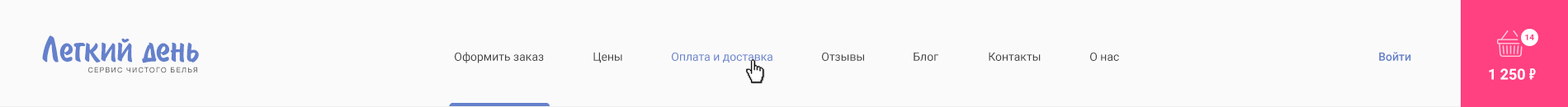
<style>
.page{position:relative;width:1568px;height:107px;background:#fafafa}
.page>*{position:absolute;margin:0}
.t1{font:41.3px "BrushType-SemiBold";color:#6581cc}
.t2{font:8.3px "Roboto-Bold";color:#ff4081;text-transform:uppercase}
.t3{font:11.6px "Roboto-Regular";color:#424242}
.t4{font:11.6px "Roboto-Regular";color:#6581cc}
.t5{font:11.6px "Roboto-Medium";color:#6581cc}
.t6{font:7.1px "HelveticaNeue";letter-spacing:0.15em;color:#424242;text-transform:uppercase}
.t7{font:14.9px "Roboto-Bold";color:#ffffff}
.t8{font:14.9px "PTRoubleSans";color:#ffffff}
</style>
<div class="page">
<p class="t1" style="left:42px;top:35px;width:157px;height:29px">Легкий день</p>
<p class="t2" style="left:1525px;top:34px;width:9px;height:6px">14</p>
<p class="t3" style="left:455px;top:52px;width:89px;height:12px">Оформить заказ</p>
<p class="t3" style="left:593px;top:52px;width:29px;height:12px">Цены</p>
<p class="t4" style="left:672px;top:52px;width:100px;height:11px">Оплата и доставка</p>
<p class="t3" style="left:822px;top:52px;width:42px;height:9px">Отзывы</p>
<p class="t3" style="left:914px;top:52px;width:24px;height:9px">Блог</p>
<p class="t3" style="left:989px;top:52px;width:52px;height:9px">Контакты</p>
<p class="t3" style="left:1090px;top:52px;width:29px;height:9px">О нас</p>
<p class="t5" style="left:1379px;top:52px;width:32px;height:9px">Войти</p>
<p class="t6" style="left:88px;top:67px;width:109px;height:6px">Сервис чистого белья</p>
<p class="t7" style="left:1489px;top:68px;width:47px;height:12px">1 250 <span class="t8">1</span></p>
</div>
